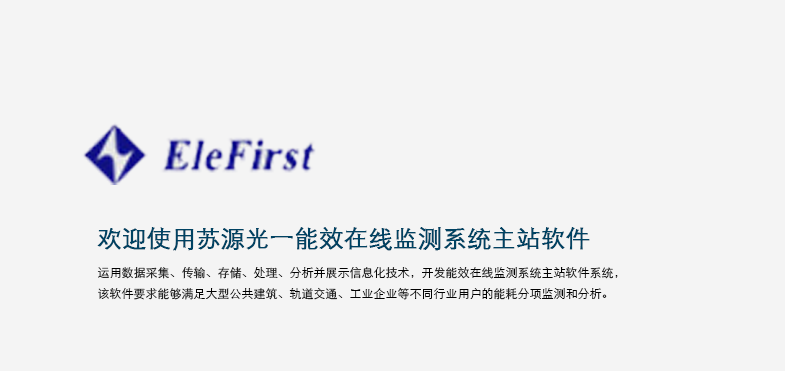
<style>
.page{position:relative;width:785px;height:371px;background:#f4f4f4}
.page>*{position:absolute;margin:0}
.t1{font:24px "STHeitiSC-Light";color:#004262;font-weight:bold}
.t2{font:12px "STHeitiSC-Light";color:#020202}
</style>
<div class="page">
<p class="t1" style="left:97px;top:227px;width:493px;height:24px">欢迎使用苏源光一能效在线监测系统主站软件</p>
<p class="t2" style="left:97px;top:267px;width:521px;height:33px">运用数据采集、传输、存储、处理、分析并展示信息化技术，开发能效在线监测系统主站软件系统，<br>该软件要求能够满足大型公共建筑、轨道交通、工业企业等不同行业用户的能耗分项监测和分析。</p>
</div>
